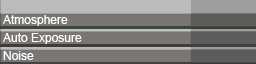
<style>
.page{position:relative;width:256px;height:64px;background:#797673}
.page>*{position:absolute;margin:0}
.t1{font:12px "ArialMT";color:#ffffff}
</style>
<div class="page">
<p class="t1" style="left:3px;top:15px;width:65px;height:11px">Atmosphere</p>
<p class="t1" style="left:3px;top:33px;width:79px;height:11px">Auto Exposure</p>
<p class="t1" style="left:3px;top:51px;width:31px;height:9px">Noise</p>
</div>
